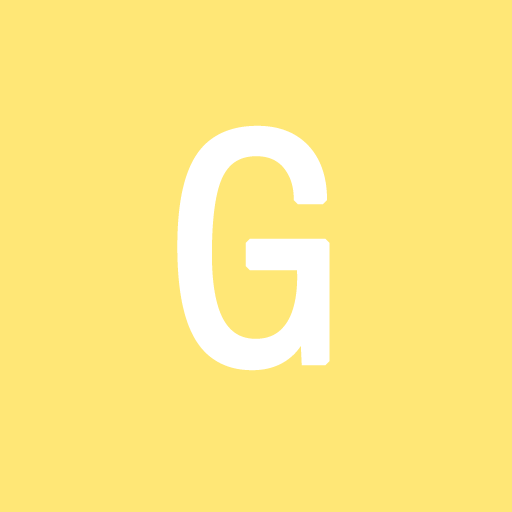
<style>
.page{position:relative;width:512px;height:512px;background:#ffe776}
.page>*{position:absolute;margin:0}
.t1{font:300px "#9Slide03SwissCondensed-Regular";letter-spacing:-0.025em;color:#ffffff;font-weight:bold}
</style>
<div class="page">
<p class="t1" style="left:177px;top:125px;width:153px;height:246px">G</p>
</div>
